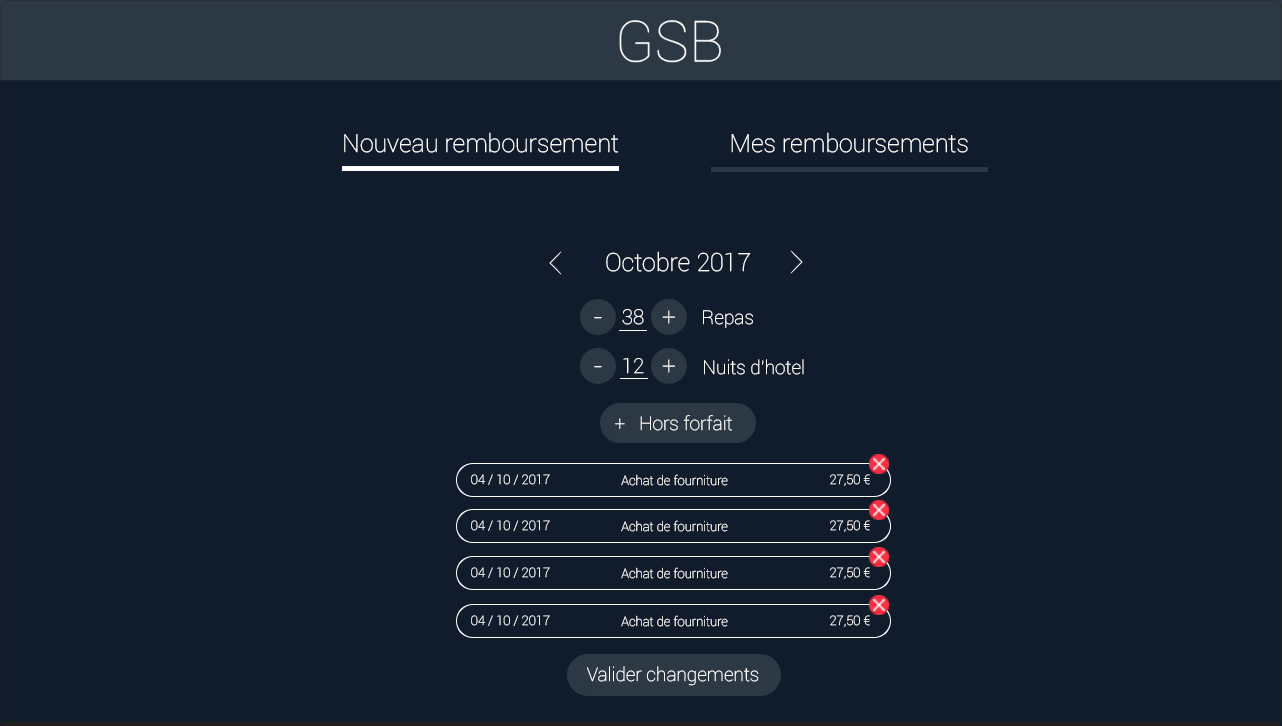
<style>
.page{position:relative;width:1282px;height:726px;background:#101c2b}
.page>*{position:absolute;margin:0}
.t1{font:25px "Roboto-Thin";color:#ffffff}
.t2{font:23.9px "Roboto-Thin";color:#ffffff}
.t3{font:20.6px "Roboto-Thin";color:#ffffff}
.t4{font:19.1px "Roboto-Thin";color:#ffffff}
.t5{font:13px "Roboto-Thin";color:#ffffff}
.t6{font:19px "Roboto-Thin";color:#ffffff}
</style>
<div class="page">
<p class="t1" style="left:344px;top:132px;width:274px;height:21px">Nouveau remboursement</p>
<p class="t1" style="left:731px;top:132px;width:237px;height:21px">Mes remboursements</p>
<p class="t1" style="left:606px;top:251px;width:145px;height:21px">Octobre 2017</p>
<p class="t2" style="left:594px;top:317px;width:8px;height:2px">-</p>
<p class="t3" style="left:622px;top:309px;width:22px;height:16px">38</p>
<p class="t2" style="left:662px;top:310px;width:13px;height:14px">+</p>
<p class="t4" style="left:703px;top:310px;width:50px;height:18px">Repas</p>
<p class="t2" style="left:594px;top:366px;width:8px;height:2px">-</p>
<p class="t3" style="left:623px;top:358px;width:21px;height:16px">12</p>
<p class="t2" style="left:662px;top:359px;width:13px;height:14px">+</p>
<p class="t4" style="left:704px;top:359px;width:100px;height:16px">Nuits d’hotel</p>
<p class="t4" style="left:615px;top:415px;width:117px;height:16px">+   Hors forfait</p>
<p class="t5" style="left:471px;top:474px;width:79px;height:11px">04 / 10 / 2017</p>
<p class="t5" style="left:621px;top:474px;width:107px;height:12px">Achat de fourniture</p>
<p class="t5" style="left:830px;top:474px;width:40px;height:12px">27,50 €</p>
<p class="t5" style="left:471px;top:520px;width:79px;height:11px">04 / 10 / 2017</p>
<p class="t5" style="left:621px;top:520px;width:107px;height:12px">Achat de fourniture</p>
<p class="t5" style="left:830px;top:520px;width:40px;height:12px">27,50 €</p>
<p class="t5" style="left:471px;top:567px;width:79px;height:11px">04 / 10 / 2017</p>
<p class="t5" style="left:621px;top:567px;width:107px;height:12px">Achat de fourniture</p>
<p class="t5" style="left:830px;top:567px;width:40px;height:12px">27,50 €</p>
<p class="t5" style="left:471px;top:615px;width:79px;height:11px">04 / 10 / 2017</p>
<p class="t5" style="left:621px;top:615px;width:107px;height:12px">Achat de fourniture</p>
<p class="t5" style="left:830px;top:615px;width:40px;height:12px">27,50 €</p>
<p class="t6" style="left:586px;top:666px;width:173px;height:20px">Valider changements</p>
</div>
